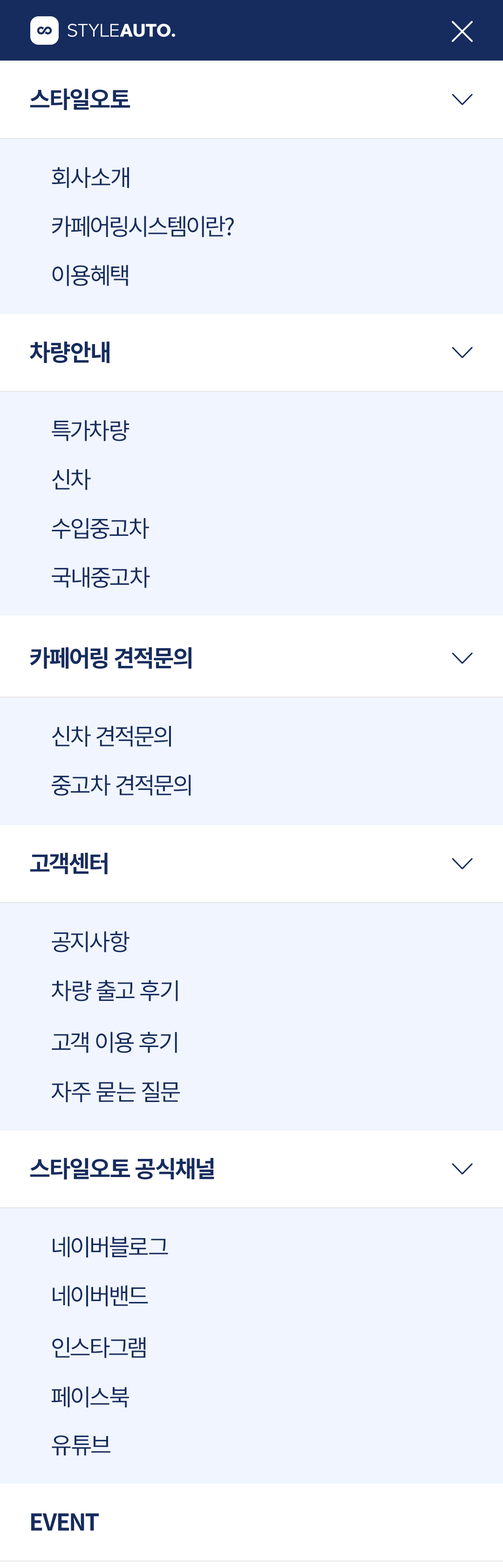
<style>
.page{position:relative;width:503px;height:1568px;background:#f0f5ff}
.page>*{position:absolute;margin:0}
.t1{font:23.3px "NotoSansCJKkr-Bold";letter-spacing:-0.04em;color:#162c5e}
.t2{font:23.3px "NotoSansCJKkr-Regular";letter-spacing:-0.04em;color:#162c5e}
</style>
<div class="page">
<p class="t1" style="left:30px;top:89px;width:100px;height:21px">스타일오토</p>
<p class="t2" style="left:52px;top:167px;width:77px;height:21px">회사소개</p>
<p class="t2" style="left:52px;top:216px;width:182px;height:21px">카페어링시스템이란?</p>
<p class="t2" style="left:52px;top:265px;width:76px;height:21px">이용혜택</p>
<p class="t1" style="left:29px;top:342px;width:81px;height:21px">차량안내</p>
<p class="t2" style="left:52px;top:420px;width:78px;height:21px">특가차량</p>
<p class="t2" style="left:52px;top:469px;width:39px;height:21px">신차</p>
<p class="t2" style="left:52px;top:518px;width:97px;height:21px">수입중고차</p>
<p class="t2" style="left:52px;top:567px;width:98px;height:21px">국내중고차</p>
<p class="t1" style="left:30px;top:647px;width:162px;height:22px">카페어링 견적문의</p>
<p class="t2" style="left:52px;top:726px;width:119px;height:21px">신차 견적문의</p>
<p class="t2" style="left:52px;top:774px;width:139px;height:22px">중고차 견적문의</p>
<p class="t1" style="left:30px;top:853px;width:78px;height:22px">고객센터</p>
<p class="t2" style="left:52px;top:931px;width:78px;height:21px">공지사항</p>
<p class="t2" style="left:51px;top:980px;width:127px;height:21px">차량 출고 후기</p>
<p class="t2" style="left:52px;top:1032px;width:125px;height:21px">고객 이용 후기</p>
<p class="t2" style="left:51px;top:1081px;width:129px;height:21px">자주 묻는 질문</p>
<p class="t1" style="left:30px;top:1158px;width:184px;height:22px">스타일오토 공식채널</p>
<p class="t2" style="left:53px;top:1236px;width:115px;height:22px">네이버블로그</p>
<p class="t2" style="left:53px;top:1285px;width:95px;height:22px">네이버밴드</p>
<p class="t2" style="left:52px;top:1337px;width:94px;height:21px">인스타그램</p>
<p class="t2" style="left:51px;top:1386px;width:78px;height:22px">페이스북</p>
<p class="t2" style="left:52px;top:1435px;width:58px;height:21px">유튜브</p>
<p class="t1" style="left:31px;top:1513px;width:68px;height:18px">EVENT</p>
</div>
